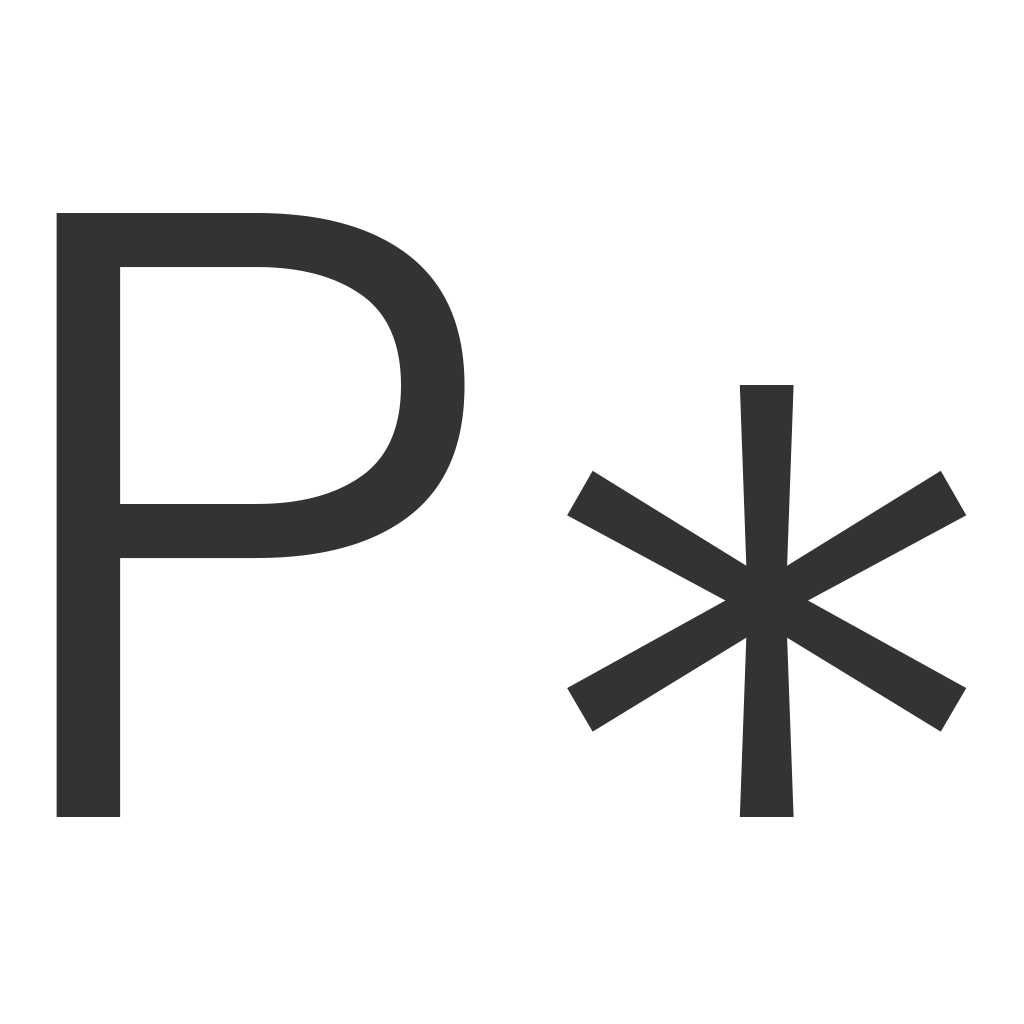
<style>
.page{position:relative;width:1024px;height:1024px;background:#ffffff}
.page>*{position:absolute;margin:0}
.t1{font:948.1px "AnonymousPro";color:#333333}
</style>
<div class="page">
<p class="t1" style="left:56px;top:213px;width:911px;height:604px">P*</p>
</div>
